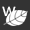
<style>
.page{position:relative;width:30px;height:30px;background:#333333}
.page>*{position:absolute;margin:0}
.t1{font:17.3px "MicrosoftYaHei";color:#ffffff}
</style>
<div class="page">
<p class="t1" style="left:2px;top:6px;width:14px;height:11px">w</p>
</div>
